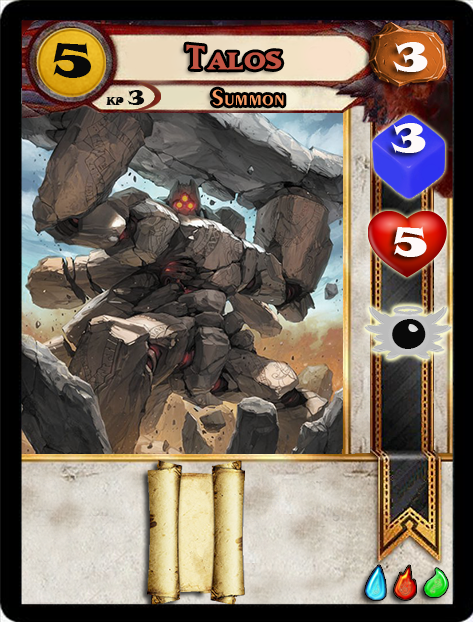
<style>
.page{position:relative;width:473px;height:622px}
.page>*{position:absolute;margin:0}
.t1{font:46.6px "SnapITC-Regular";color:#090909;scale:1.05 1}
.t2{font:40px "MatrixBoldSmallCaps";color:#c25443;scale:1.06 1}
.t3{font:40px "SnapITC-Regular";color:#fef9f9;scale:1.05 1}
.t4{font:22.7px "Exotic350BT-DemiBold";color:#f89c64;scale:1.06 1}
.t5{font:20.5px "SnapITC-Regular";color:#090909}
.t6{font:40px "SnapITC-Regular";color:#090909;scale:1.05 1}
</style>
<div class="page">
<p class="t1" style="left:53px;top:42px;width:38px;height:36px">5</p>
<p class="t2" style="left:186px;top:44px;width:96px;height:26px">Talos</p>
<p class="t3" style="left:393px;top:42px;width:35px;height:30px">3</p>
<p class="t4" style="left:212px;top:89px;width:72px;height:17px">Summon</p>
<p class="t5" style="left:127px;top:90px;width:18px;height:15px">3</p>
<p class="t3" style="left:391px;top:123px;width:35px;height:30px">3</p>
<p class="t3" style="left:394px;top:226px;width:33px;height:31px">5</p>
<p class="t6" style="left:392px;top:319px;width:34px;height:30px">0</p>
</div>
